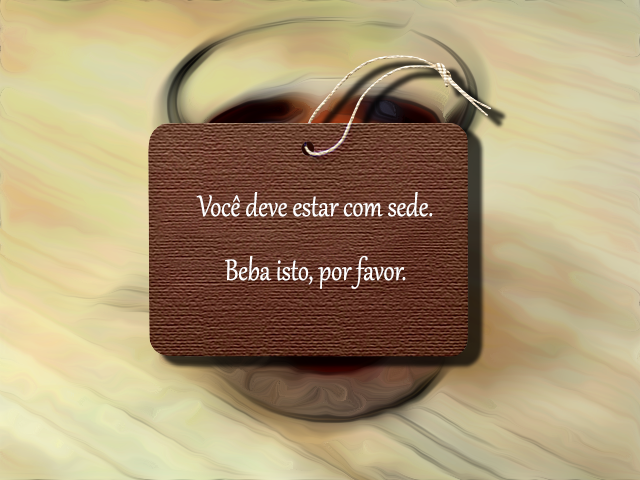
<style>
.page{position:relative;width:640px;height:480px}
.page>*{position:absolute;margin:0}
.t1{font:36px/32px "Gabriola";color:#ffffff;scale:0.85 1}
.t2{font:30px/32px "Gabriola";color:#ffffff;scale:0.85 1}
</style>
<div class="page">
<p class="t1" style="left:196px;top:192px;width:237px;height:97px;text-align:center"><span class="t2"><br></span>Você deve estar com sede.<br><br>Beba isto, por favor.</p>
</div>
